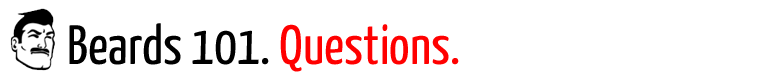
<style>
.page{position:relative;width:766px;height:80px;background:#ffffff}
.page>*{position:absolute;margin:0}
.t1{font:55.3px "YanoneKaffeesatz-Regular";color:#000000}
.t2{font:55.3px "YanoneKaffeesatz-Regular";color:#ff0000}
</style>
<div class="page">
<p class="t1" style="left:69px;top:23px;width:390px;height:49px">Beards 101.<span class="t2"> Questions.</span></p>
</div>
